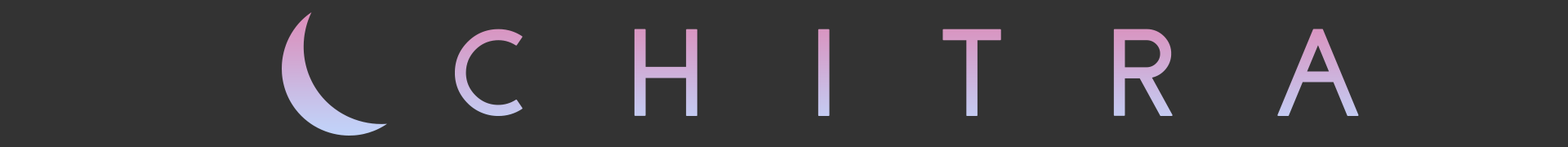
<style>
.page{position:relative;width:1568px;height:147px;background:#333333}
.page>*{position:absolute;margin:0}
.t1{font:124.2px "Coves-Bold";letter-spacing:0.8em;color:#cfafd9}
</style>
<div class="page">
<p class="t1" style="left:455px;top:29px;width:904px;height:87px">CHITRA</p>
</div>
